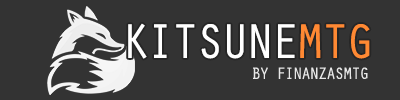
<style>
.page{position:relative;width:400px;height:100px;background:#333333}
.page>*{position:absolute;margin:0}
.t1{font:50px "OratorStd";letter-spacing:-0.1em;color:#ffffff}
.t2{font:50px "OratorStd";letter-spacing:-0.1em;color:#ff8933}
.t3{font:16.7px "OratorStd";letter-spacing:-0.1em;color:#e8e8e8}
</style>
<div class="page">
<p class="t1" style="left:128px;top:23px;width:242px;height:36px">KITSUNE<span class="t2">MTG</span></p>
<p class="t3" style="left:253px;top:67px;width:115px;height:13px">BY FINANZASMTG</p>
</div>
